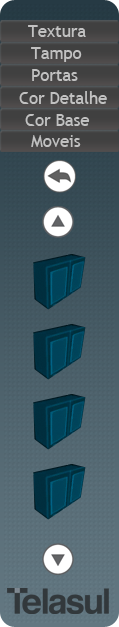
<style>
.page{position:relative;width:119px;height:627px}
.page>*{position:absolute;margin:0}
.t1{font:16.7px "TrebuchetMS";color:#c1c1c1}
</style>
<div class="page">
<p class="t1" style="left:28px;top:25px;width:58px;height:12px">Textura</p>
<p class="t1" style="left:31px;top:47px;width:51px;height:15px">Tampo</p>
<p class="t1" style="left:32px;top:69px;width:46px;height:12px">Portas</p>
<p class="t1" style="left:19px;top:91px;width:88px;height:13px">Cor Detalhe</p>
<p class="t1" style="left:25px;top:114px;width:65px;height:12px">Cor Base</p>
<p class="t1" style="left:31px;top:135px;width:50px;height:12px">Moveis</p>
</div>
